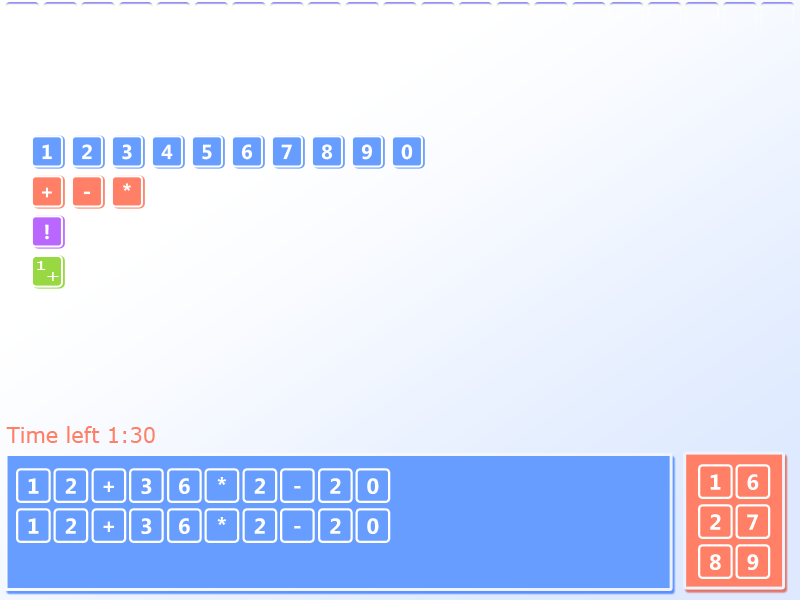
<style>
.page{position:relative;width:800px;height:600px}
.page>*{position:absolute;margin:0}
.t1{font:27.6px "SegoeKeycaps";color:#ffffff}
.t2{font:13.4px "Verdana";color:#ffffff;scale:1.49 1}
.t3{font:14.6px "Verdana";color:#ffffff;scale:1.2 1}
.t4{font:20.9px "Verdana";color:#ff8067}
.t5{font:30px "SegoeKeycaps";color:#ffffff}
</style>
<div class="page">
<p class="t1" style="left:30px;top:135px;width:34px;height:33px">1</p>
<p class="t1" style="left:70px;top:135px;width:34px;height:33px">2</p>
<p class="t1" style="left:110px;top:135px;width:34px;height:33px">3</p>
<p class="t1" style="left:150px;top:135px;width:34px;height:33px">4</p>
<p class="t1" style="left:190px;top:135px;width:34px;height:33px">5</p>
<p class="t1" style="left:230px;top:135px;width:34px;height:33px">6</p>
<p class="t1" style="left:270px;top:135px;width:34px;height:33px">7</p>
<p class="t1" style="left:310px;top:135px;width:34px;height:33px">8</p>
<p class="t1" style="left:350px;top:135px;width:34px;height:33px">9</p>
<p class="t1" style="left:390px;top:135px;width:34px;height:33px">0</p>
<p class="t1" style="left:30px;top:175px;width:34px;height:33px">+</p>
<p class="t1" style="left:70px;top:175px;width:34px;height:33px">-</p>
<p class="t1" style="left:110px;top:175px;width:34px;height:33px">*</p>
<p class="t1" style="left:30px;top:215px;width:34px;height:33px">!</p>
<p class="t2" style="left:37px;top:261px;width:9px;height:9px">1</p>
<p class="t3" style="left:47px;top:272px;width:12px;height:9px">+</p>
<p class="t4" style="left:6px;top:426px;width:149px;height:17px">Time left 1:30</p>
<p class="t5" style="left:16px;top:468px;width:375px;height:35px">12+36*2-20</p>
<p class="t5" style="left:698px;top:464px;width:73px;height:35px">16</p>
<p class="t5" style="left:16px;top:508px;width:375px;height:35px">12+36*2-20</p>
<p class="t5" style="left:698px;top:504px;width:73px;height:35px">27</p>
<p class="t5" style="left:698px;top:544px;width:73px;height:35px">89</p>
</div>
